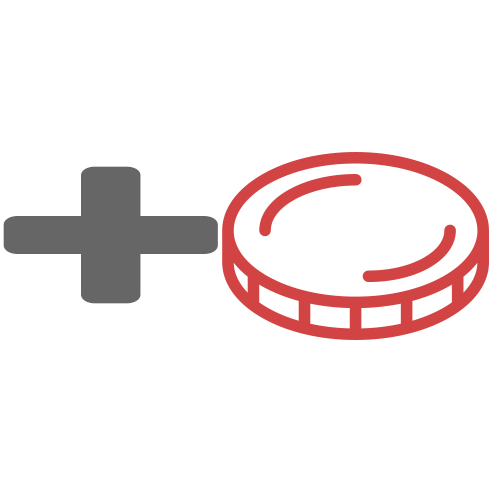
<style>
.page{position:relative;width:500px;height:500px;background:#ffffff}
.page>*{position:absolute;margin:0}
.t1{font:311.2px "Antwerpen-Regular";color:#666666;scale:1.57 1}
</style>
<div class="page">
<p class="t1" style="left:3px;top:166px;width:215px;height:138px">+</p>
</div>
